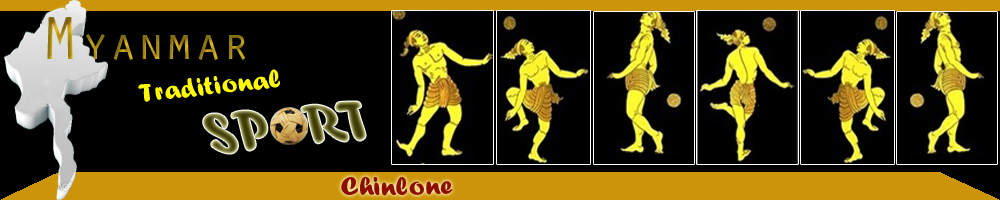
<style>
.page{position:relative;width:1000px;height:200px;background:#000000}
.page>*{position:absolute;margin:0}
.t1{font:62.5px "OratorStd"}
.t2{font:46.9px "OratorStd"}
.t3{font:28px "ForteMT";color:#fefc00;scale:1.05 1}
.t4{font:66.7px "ForteMT";scale:0.92 1}
.t5{font:28px "ForteMT";color:#8d0d03;scale:1.05 1}
</style>
<div class="page">
<p class="t1" style="left:47px;top:17px;width:26px;height:42px">M</p>
<p class="t2" style="left:86px;top:34px;width:160px;height:26px">yanmar</p>
<p class="t3" style="left:138px;top:69px;width:142px;height:33px;rotate:-6deg">Traditional</p>
<p class="t4" style="left:203px;top:101px;width:163px;height:53px;rotate:-5deg">SP  RT</p>
<p class="t5" style="left:341px;top:176px;width:112px;height:20px">Chinlone</p>
</div>
